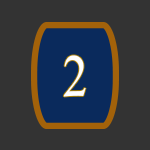
<style>
.page{position:relative;width:150px;height:150px;background:#333333}
.page>*{position:absolute;margin:0}
.t1{font:62.5px "TimesNewRomanPSMT";letter-spacing:0.1em;color:#ffffff;scale:0.75 1}
</style>
<div class="page">
<p class="t1" style="left:63px;top:55px;width:23px;height:42px">2</p>
</div>
